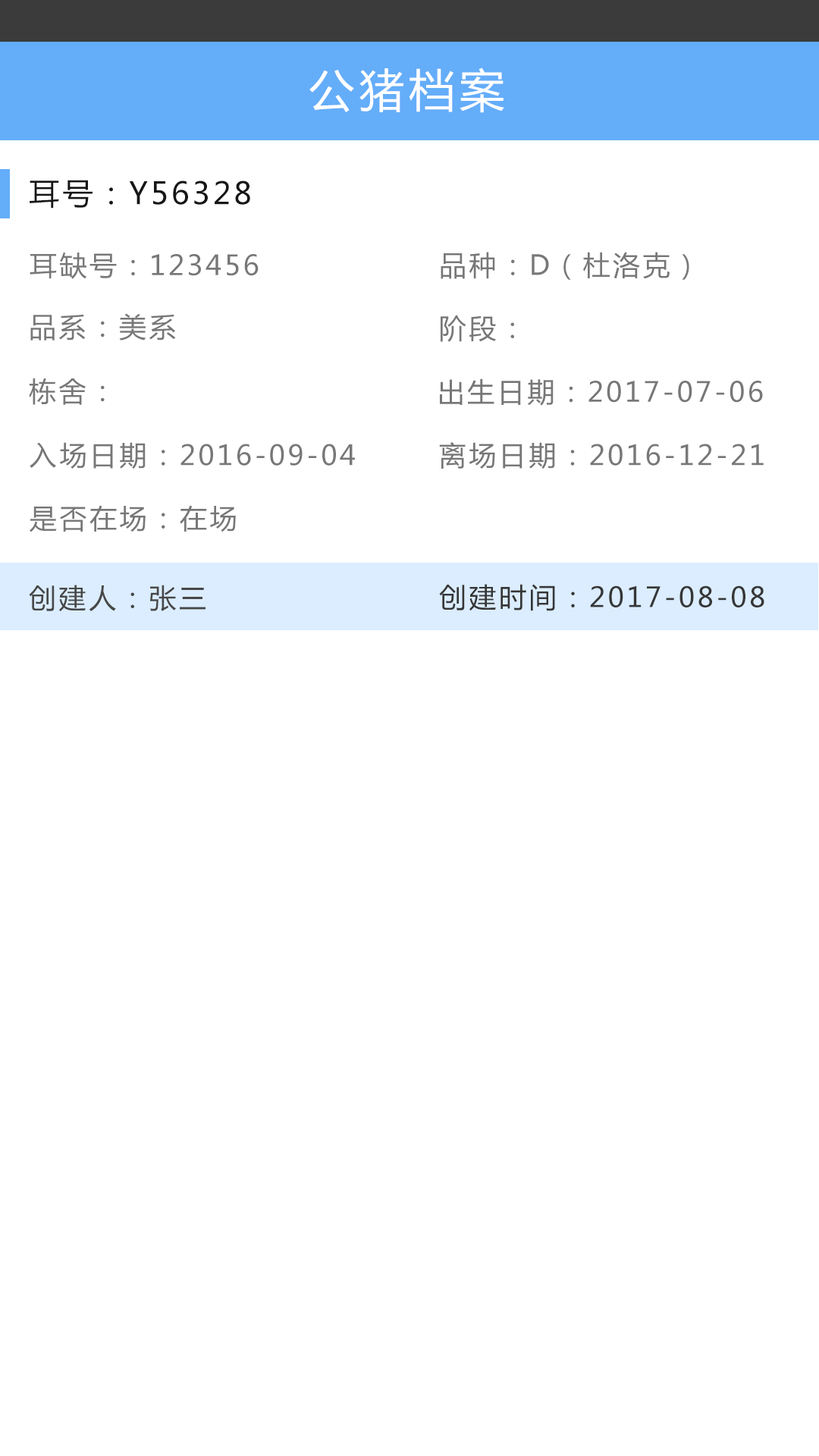
<style>
.page{position:relative;width:819px;height:1456px;background:#ffffff}
.page>*{position:absolute;margin:0}
.t1{font:45.5px "MicrosoftYaHei";letter-spacing:0.1em;color:#ffffff}
.t2{font:30.3px "MicrosoftYaHei";letter-spacing:0.1em;color:#161616}
.t3{font:27.3px "MicrosoftYaHei";letter-spacing:0.1em;color:#777777}
.t4{font:27.3px "MicrosoftYaHei";letter-spacing:0.1em;color:#474747}
.t5{font:27.3px "MicrosoftYaHei";letter-spacing:0.1em;color:#363636}
</style>
<div class="page">
<p class="t1" style="left:309px;top:67px;width:195px;height:46px">公猪档案</p>
<p class="t2" style="left:30px;top:180px;width:220px;height:29px">耳号：Y56328</p>
<p class="t3" style="left:30px;top:252px;width:229px;height:27px">耳缺号：123456</p>
<p class="t3" style="left:441px;top:252px;width:248px;height:28px">品种：D（杜洛克）</p>
<p class="t3" style="left:30px;top:313px;width:146px;height:27px">品系：美系</p>
<p class="t3" style="left:441px;top:315px;width:73px;height:27px">阶段：</p>
<p class="t3" style="left:29px;top:378px;width:76px;height:27px">栋舍：</p>
<p class="t3" style="left:440px;top:378px;width:323px;height:28px">出生日期：2017-07-06</p>
<p class="t3" style="left:30px;top:442px;width:325px;height:27px">入场日期：2016-09-04</p>
<p class="t3" style="left:439px;top:442px;width:325px;height:27px">离场日期：2016-12-21</p>
<p class="t3" style="left:30px;top:505px;width:206px;height:27px">是否在场：在场</p>
<p class="t4" style="left:29px;top:585px;width:177px;height:27px">创建人：张三</p>
<p class="t5" style="left:439px;top:584px;width:325px;height:27px">创建时间：2017-08-08</p>
</div>
